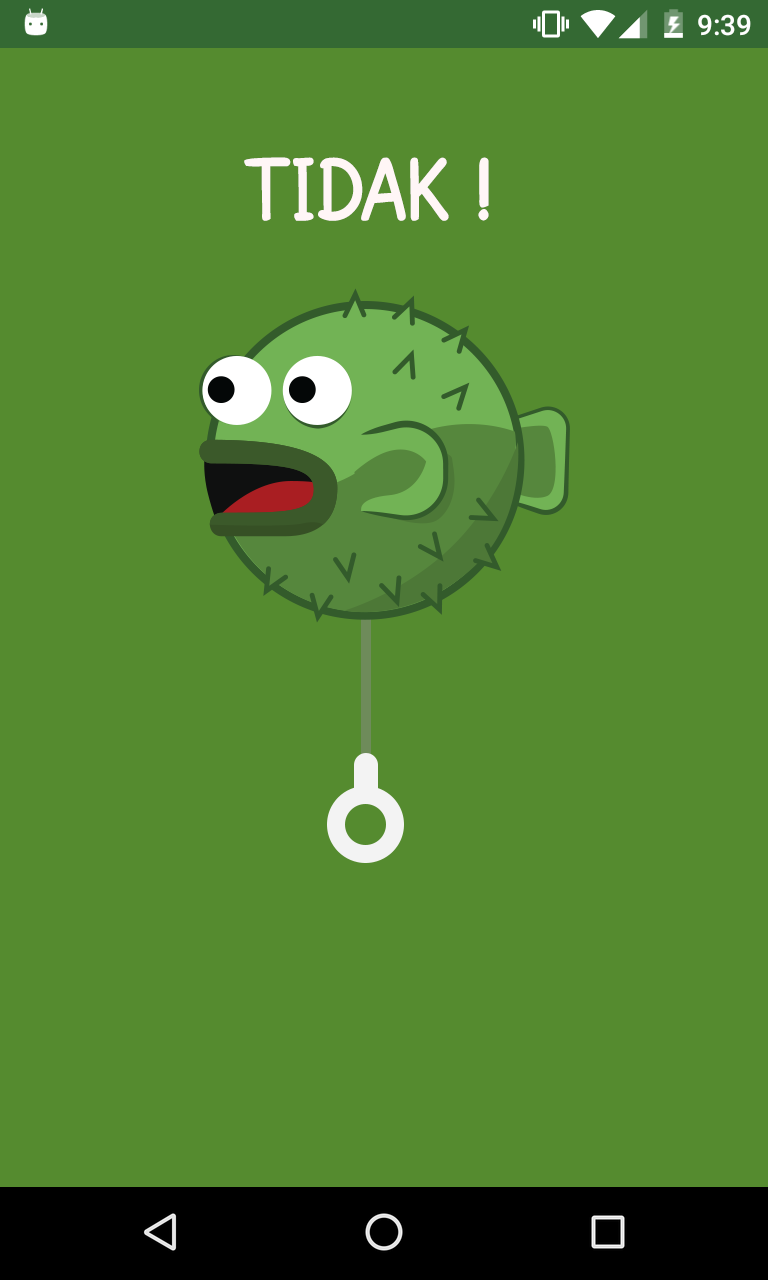
<style>
.page{position:relative;width:768px;height:1280px;background:#558b2f}
.page>*{position:absolute;margin:0}
.t1{font:90px "SFCartoonistHand-Bold";color:#fff6f6;font-variant:small-caps}
</style>
<div class="page">
<p class="t1" style="left:244px;top:157px;width:245px;height:64px">TIDAK !</p>
</div>
